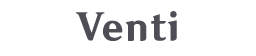
<style>
.page{position:relative;width:256px;height:56px;background:#ffffff}
.page>*{position:absolute;margin:0}
.t1{font:36px "HYWenHei-HEW";color:#4f4e57}
</style>
<div class="page">
<p class="t1" style="left:75px;top:11px;width:102px;height:30px">Venti</p>
</div>
